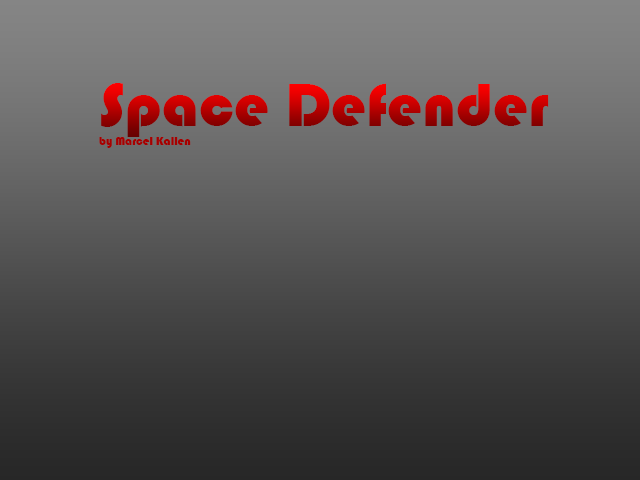
<style>
.page{position:relative;width:640px;height:480px}
.page>*{position:absolute;margin:0}
.t1{font:62.8px "Bauhaus93"}
.t2{font:12px "Bauhaus93";color:#a70000}
</style>
<div class="page">
<p class="t1" style="left:101px;top:83px;width:448px;height:54px">Space Defender</p>
<p class="t2" style="left:99px;top:137px;width:92px;height:11px">by Marcel Kallen</p>
</div>
